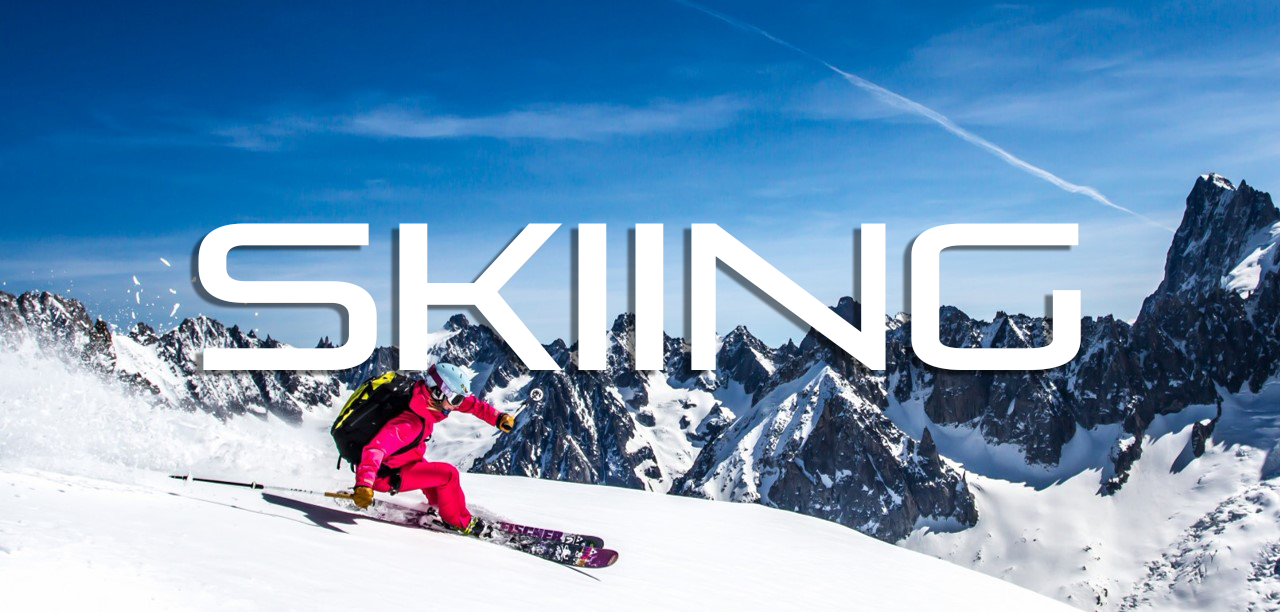
<style>
.page{position:relative;width:1280px;height:612px}
.page>*{position:absolute;margin:0}
.t1{font:208px "PirulenRg-Regular";color:#ffffff}
</style>
<div class="page">
<p class="t1" style="left:198px;top:223px;width:883px;height:147px">skiing</p>
</div>
